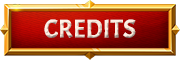
<style>
.page{position:relative;width:180px;height:60px}
.page>*{position:absolute;margin:0}
.t1{font:25.6px "Acme-Regular";color:#fdecde}
</style>
<div class="page">
<p class="t1" style="left:44px;top:19px;width:92px;height:19px">CREDITS</p>
</div>
